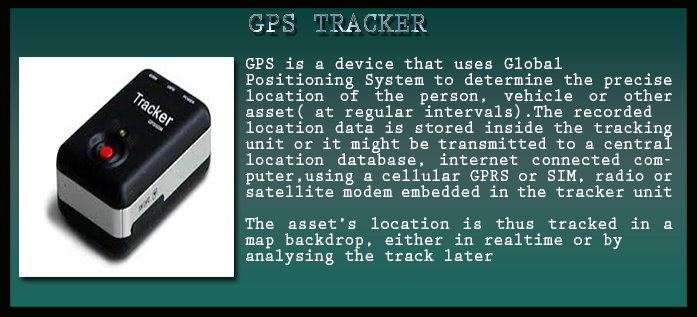
<style>
.page{position:relative;width:697px;height:317px}
.page>*{position:absolute;margin:0}
.t1{font:28.8px "PrestigeEliteStd-Bd";letter-spacing:0.002em;scale:0.94 1}
.t2{font:17.6px/16px "PrestigeEliteStd-Bd";letter-spacing:0.002em;color:#fdfefe;scale:0.94 1}
</style>
<div class="page">
<p class="t1" style="left:249px;top:13px;width:178px;height:19px">GPS TRACKER</p>
<p class="t2" style="left:245px;top:57px;width:428px;height:208px;text-align:justify">GPS is a device that uses Global <br>Positioning System to determine the precise location of the person, vehicle or other asset( at regular intervals).The recorded <br>location data is stored inside the tracking unit or it might be transmitted to a central <br>location database, internet connected computer,using a cellular GPRS or SIM, radio or satellite modem embedded in the tracker unit<br><br>The asset’s location is thus tracked in a map backdrop, either in realtime or by <br>analysing the track later</p>
</div>
